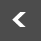
<style>
.page{position:relative;width:41px;height:41px;background:#4c4c4c}
.page>*{position:absolute;margin:0}
.t1{font:40px "Cabin-Bold";color:#ffffff}
</style>
<div class="page">
<p class="t1" style="left:12px;top:11px;width:15px;height:17px">&lt;</p>
</div>
